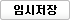
<style>
.page{position:relative;width:70px;height:20px;background:#ffffff}
.page>*{position:absolute;margin:0}
.t1{font:12px "morris9";color:#000000;font-weight:bold;scale:0.96 1}
</style>
<div class="page">
<p class="t1" style="left:14px;top:5px;width:43px;height:10px">임시저장</p>
</div>
